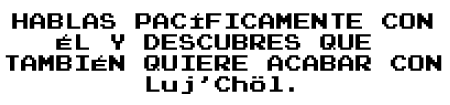
<style>
.page{position:relative;width:450px;height:105px;background:#ffffff}
.page>*{position:absolute;margin:0}
.t1{font:17.6px "PressStart2P";color:#000000}
</style>
<div class="page">
<p class="t1" style="left:5px;top:13px;width:437px;height:81px;text-align:center">HABLAS PACÍFICAMENTE CON<br>ÉL Y DESCUBRES QUE <br>TAMBIÉN QUIERE ACABAR CON<br>Luj’Chöl.</p>
</div>
